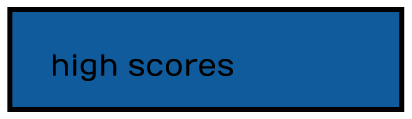
<style>
.page{position:relative;width:412px;height:119px;background:#0f5b9b}
.page>*{position:absolute;margin:0}
.t1{font:30px "Numans-Regular";color:#000000}
</style>
<div class="page">
<p class="t1" style="left:53px;top:54px;width:180px;height:27px">high scores</p>
</div>
